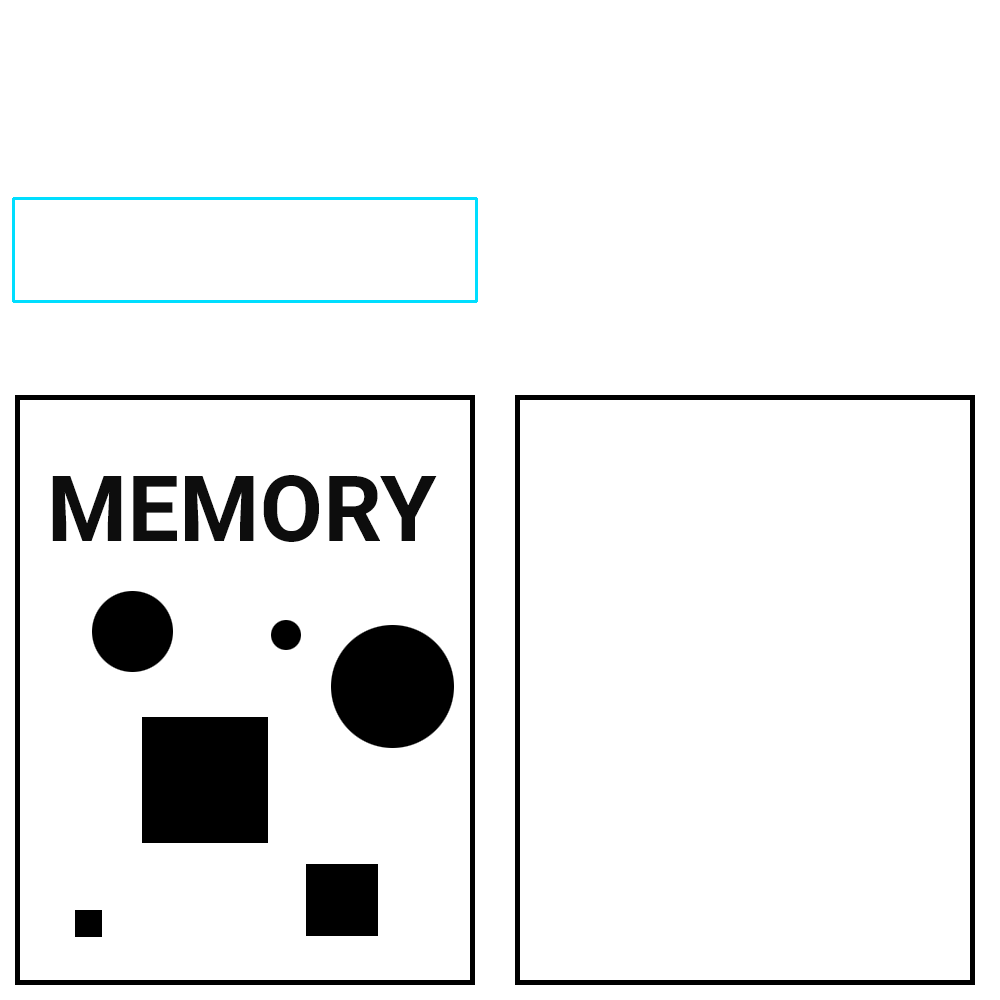
<style>
.page{position:relative;width:1000px;height:1000px;background:#ffffff}
.page>*{position:absolute;margin:0}
.t1{font:91.4px "Roboto-Bold";letter-spacing:0.005em;color:#0d0d0d}
</style>
<div class="page">
<p class="t1" style="left:52px;top:475px;width:385px;height:67px">MEMORY</p>
</div>
